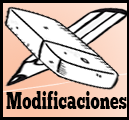
<style>
.page{position:relative;width:129px;height:120px}
.page>*{position:absolute;margin:0}
.t1{font:24px "ChunkFiveEx";color:#000000;scale:0.67 1}
</style>
<div class="page">
<p class="t1" style="left:6px;top:91px;width:121px;height:18px">Modificaciones</p>
</div>
